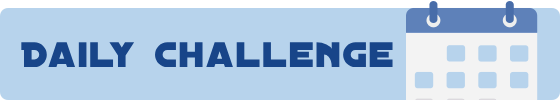
<style>
.page{position:relative;width:560px;height:100px;background:#b7d3ec}
.page>*{position:absolute;margin:0}
.t1{font:38px "DistantGalaxy";letter-spacing:0.05em;color:#184589}
</style>
<div class="page">
<p class="t1" style="left:21px;top:42px;width:372px;height:25px">Daily Challenge</p>
</div>
